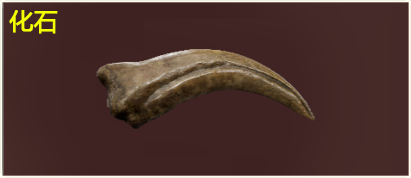
<style>
.page{position:relative;width:411px;height:178px}
.page>*{position:absolute;margin:0}
.t1{font:24px "MicrosoftYaHeiUI";color:#f4ff00;font-weight:bold}
</style>
<div class="page">
<p class="t1" style="left:9px;top:10px;width:49px;height:24px">化石</p>
</div>
